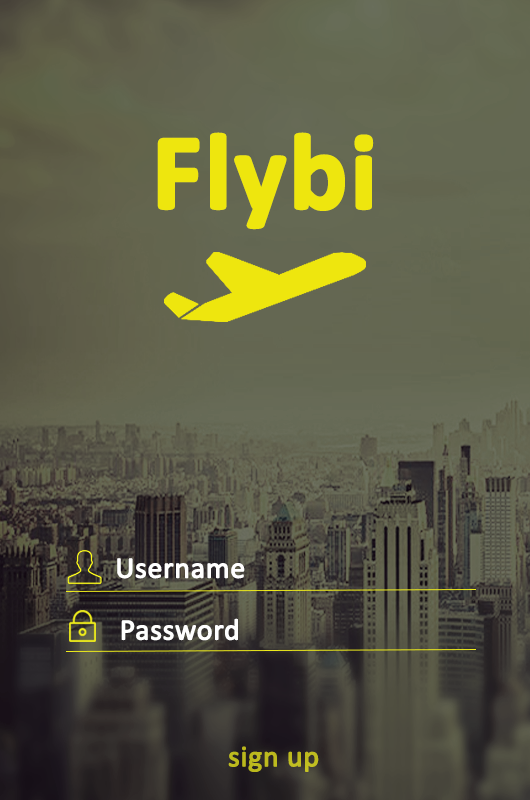
<style>
.page{position:relative;width:530px;height:800px}
.page>*{position:absolute;margin:0}
.t1{font:108.9px "Calibri-Bold";color:#eee60e;font-weight:bold}
.t2{font:29.8px "Calibri";color:#ffffff;font-weight:bold}
.t3{font:29.8px "Calibri";color:#bdbb1e;font-weight:bold}
</style>
<div class="page">
<p class="t1" style="left:157px;top:132px;width:217px;height:98px">Flybi</p>
<p class="t2" style="left:117px;top:558px;width:128px;height:21px">Username</p>
<p class="t2" style="left:121px;top:618px;width:117px;height:23px">Password</p>
<p class="t3" style="left:228px;top:746px;width:91px;height:26px">sign up</p>
</div>
